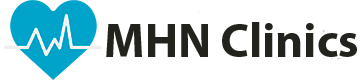
<style>
.page{position:relative;width:360px;height:80px;background:#ffffff}
.page>*{position:absolute;margin:0}
.t1{font:48px "MyriadPro-Bold";color:#22231c}
</style>
<div class="page">
<p class="t1" style="left:106px;top:22px;width:251px;height:35px">MHN Clinics</p>
</div>
